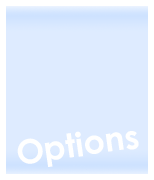
<style>
.page{position:relative;width:154px;height:180px;background:#deebff}
.page>*{position:absolute;margin:0}
.t1{font:33.3px "CenturyGothic-Bold";color:#ffffff}
</style>
<div class="page">
<p class="t1" style="left:17px;top:131px;width:122px;height:36px;rotate:-8deg">Options</p>
</div>
